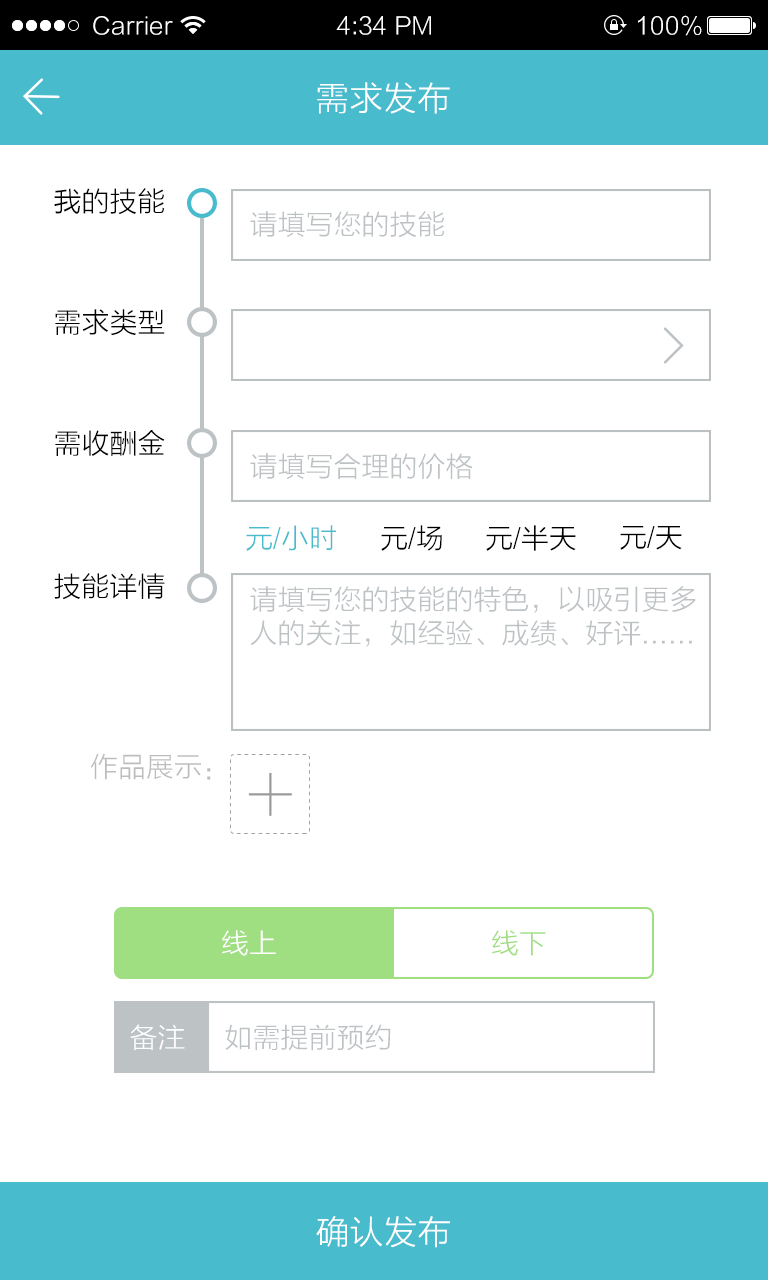
<style>
.page{position:relative;width:768px;height:1280px;background:#ffffff}
.page>*{position:absolute;margin:0}
.t1{font:24px "FZLTXHK";color:#ffffff}
.t2{font:34px "FZLTXHK";color:#ffffff}
.t3{font:28px "FZLTXHK";color:#000000}
.t4{font:28px "FZLTXHK";color:#bdc2c5}
.t5{font:28px "FZLTXHK";color:#48bbcd}
.t6{font:28px "FZLTXHK";color:#bcbcbd}
.t7{font:28px "FZLTXHK";color:#ffffff}
.t8{font:28px "FZLTXHK";color:#9fdf81}
</style>
<div class="page">
<p class="t1" style="left:93px;top:16px;width:80px;height:19px">Carrier</p>
<p class="t1" style="left:336px;top:16px;width:95px;height:19px">4:34 PM</p>
<p class="t1" style="left:638px;top:15px;width:64px;height:21px">100%</p>
<p class="t2" style="left:317px;top:82px;width:133px;height:32px">需求发布</p>
<p class="t3" style="left:54px;top:188px;width:110px;height:27px">我的技能</p>
<p class="t4" style="left:250px;top:211px;width:194px;height:27px">请填写您的技能</p>
<p class="t3" style="left:55px;top:309px;width:110px;height:27px">需求类型</p>
<p class="t3" style="left:55px;top:430px;width:110px;height:26px">需收酬金</p>
<p class="t4" style="left:250px;top:453px;width:223px;height:26px">请填写合理的价格</p>
<p class="t5" style="left:246px;top:525px;width:90px;height:26px">元/小时</p>
<p class="t3" style="left:381px;top:525px;width:61px;height:26px">元/场</p>
<p class="t3" style="left:486px;top:525px;width:90px;height:26px">元/半天</p>
<p class="t3" style="left:620px;top:526px;width:62px;height:24px">元/天</p>
<p class="t3" style="left:54px;top:573px;width:111px;height:27px">技能详情</p>
<p class="t4" style="left:250px;top:586px;width:446px;height:61px">请填写您的技能的特色，以吸引更多<br>人的关注，如经验、成绩、好评......</p>
<p class="t6" style="left:91px;top:753px;width:120px;height:27px">作品展示：</p>
<p class="t7" style="left:222px;top:930px;width:54px;height:26px">线上</p>
<p class="t8" style="left:492px;top:930px;width:54px;height:26px">线下</p>
<p class="t7" style="left:130px;top:1024px;width:55px;height:26px">备注</p>
<p class="t4" style="left:225px;top:1024px;width:166px;height:27px">如需提前预约</p>
<p class="t2" style="left:316px;top:1216px;width:134px;height:32px">确认发布</p>
</div>
